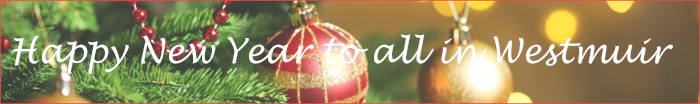
<style>
.page{position:relative;width:700px;height:104px}
.page>*{position:absolute;margin:0}
.t1{font:33.9px "LucidaHandwriting-Italic";color:#ffffff}
</style>
<div class="page">
<p class="t1" style="left:11px;top:34px;width:662px;height:40px">Happy New Year to all in Westmuir</p>
</div>
